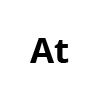
<style>
.page{position:relative;width:100px;height:100px;background:#ffffff}
.page>*{position:absolute;margin:0}
.t1{font:35px "OpenSans-Bold";color:#000000}
</style>
<div class="page">
<p class="t1" style="left:30px;top:38px;width:39px;height:25px">At</p>
</div>
